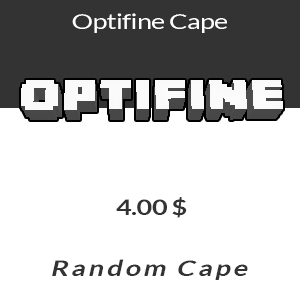
<style>
.page{position:relative;width:300px;height:304px;background:#ffffff}
.page>*{position:absolute;margin:0}
.t1{font:21.3px "Lato-Regular";letter-spacing:-0.025em;color:#ffffff;scale:1.26 1}
.t2{font:21.6px "Lato-Bold";letter-spacing:-0.025em;color:#333333;scale:1.26 1}
.t3{font:21.6px "Lato-Bold";letter-spacing:0.1em;color:#333333;font-style:italic;scale:1.26 1}
</style>
<div class="page">
<p class="t1" style="left:72px;top:13px;width:155px;height:20px">Optifine Cape</p>
<p class="t2" style="left:116px;top:197px;width:71px;height:21px">4.00 $</p>
<p class="t3" style="left:52px;top:259px;width:196px;height:21px">Random Cape</p>
</div>
